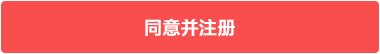
<style>
.page{position:relative;width:380px;height:54px;background:#f94e4e}
.page>*{position:absolute;margin:0}
.t1{font:18px "FZLTZHJW--GB1-0";color:#ffffff;font-weight:bold}
</style>
<div class="page">
<p class="t1" style="left:145px;top:18px;width:90px;height:19px">同意并注册</p>
</div>
